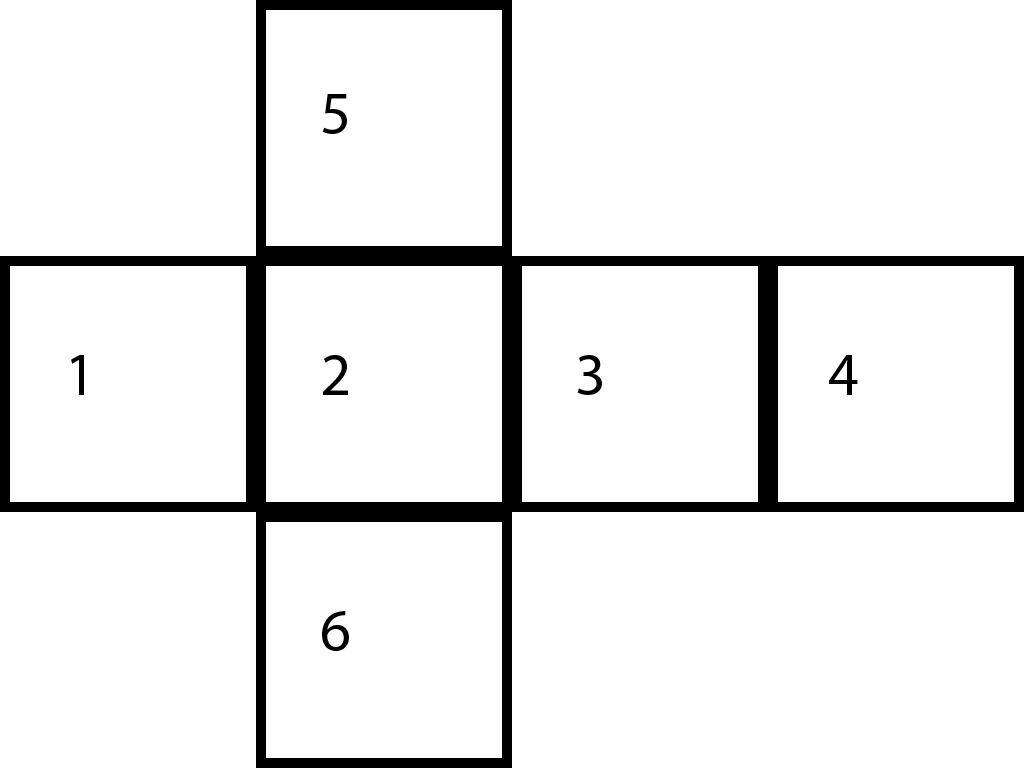
<style>
.page{position:relative;width:1024px;height:768px;background:#ffffff}
.page>*{position:absolute;margin:0}
.t1{font:60px "MyriadPro-Regular";color:#000000}
</style>
<div class="page">
<p class="t1" style="left:322px;top:94px;width:25px;height:40px">5</p>
<p class="t1" style="left:71px;top:355px;width:13px;height:40px">1</p>
<p class="t1" style="left:323px;top:355px;width:25px;height:40px">2</p>
<p class="t1" style="left:577px;top:355px;width:25px;height:40px">3</p>
<p class="t1" style="left:829px;top:355px;width:29px;height:40px">4</p>
<p class="t1" style="left:322px;top:611px;width:27px;height:40px">6</p>
</div>
